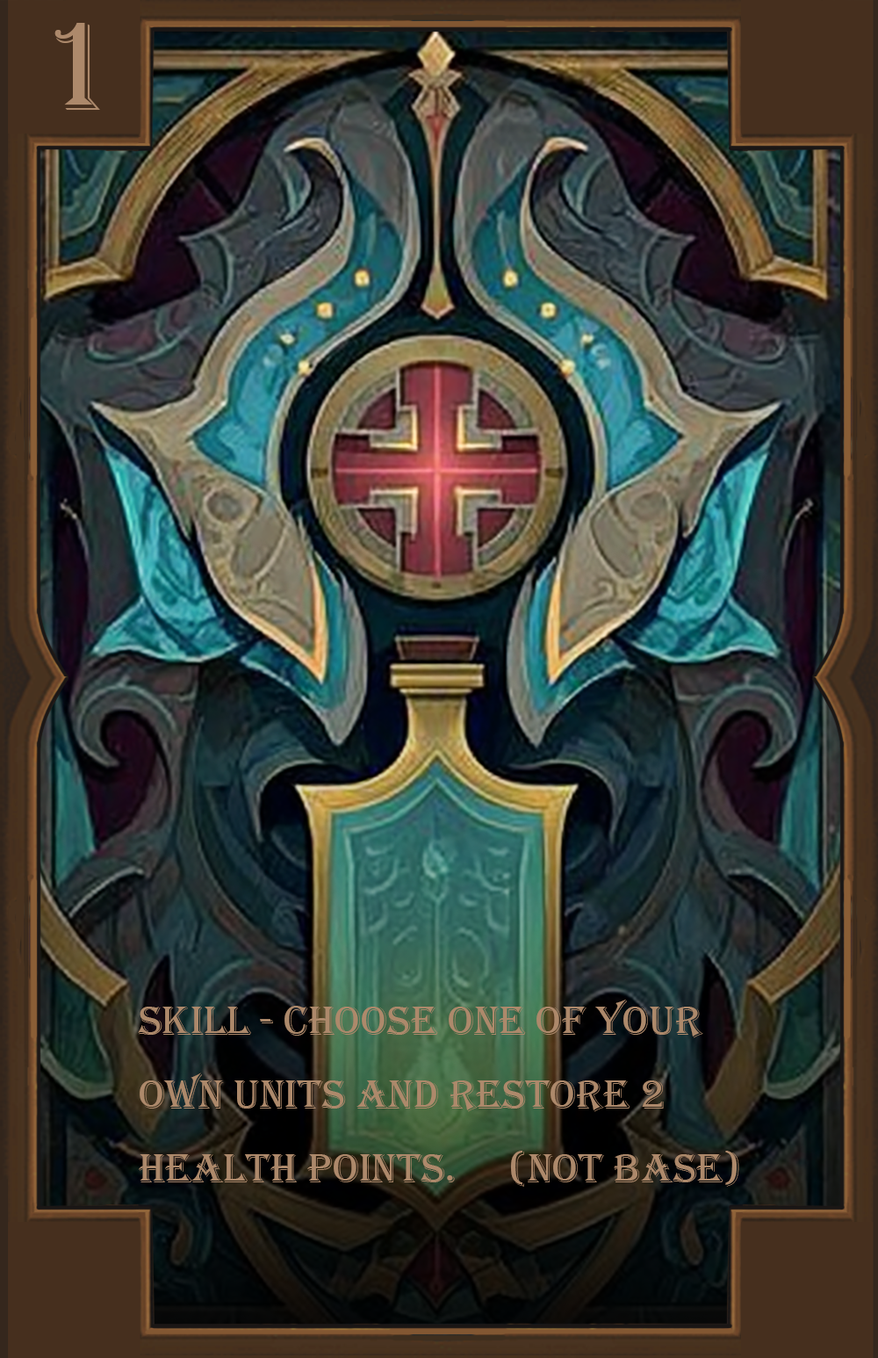
<style>
.page{position:relative;width:878px;height:1358px}
.page>*{position:absolute;margin:0}
.t1{font:131.7px "Algerian";color:#ad896b}
.t2{font:42.2px "Algerian";color:#ad896b}
</style>
<div class="page">
<p class="t1" style="left:54px;top:23px;width:46px;height:87px">1</p>
<p class="t2" style="left:138px;top:999px;width:601px;height:187px">Skill - Choose one of your <br>own units and restore 2<br>health points.     (not base)</p>
</div>
